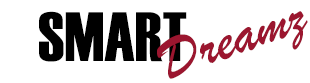
<style>
.page{position:relative;width:310px;height:83px;background:#ffffff}
.page>*{position:absolute;margin:0}
.t1{font:69.4px "Haettenschweiler";color:#000000}
.t2{font:59.1px "BrushScriptMT";color:#9b162f}
</style>
<div class="page">
<p class="t1" style="left:39px;top:11px;width:148px;height:51px">SMART</p>
<p class="t2" style="left:157px;top:11px;width:151px;height:68px;rotate:-19deg">Dreamz</p>
</div>
